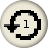
<style>
.page{position:relative;width:48px;height:48px;background:#ece9d8}
.page>*{position:absolute;margin:0}
.t1{font:11px "DejaVuSans";color:#000000}
</style>
<div class="page">
<p class="t1" style="left:24px;top:19px;width:5px;height:9px">1</p>
</div>
